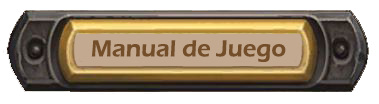
<style>
.page{position:relative;width:379px;height:104px;background:#ffffff}
.page>*{position:absolute;margin:0}
.t1{font:24px "ErasITC-Demi";color:#734e29}
</style>
<div class="page">
<p class="t1" style="left:91px;top:40px;width:195px;height:22px">Manual de Juego</p>
</div>
